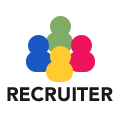
<style>
.page{position:relative;width:120px;height:120px;background:#ffffff}
.page>*{position:absolute;margin:0}
.t1{font:19.5px "Avenir-Black";color:#1a1a1a}
</style>
<div class="page">
<p class="t1" style="left:7px;top:86px;width:106px;height:16px">RECRUITER</p>
</div>
